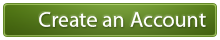
<style>
.page{position:relative;width:220px;height:40px;background:#ffffff}
.page>*{position:absolute;margin:0}
.t1{font:22px "MyriadPro-Regular";color:#ffffff}
</style>
<div class="page">
<p class="t1" style="left:39px;top:12px;width:167px;height:15px">Create an Account</p>
</div>
